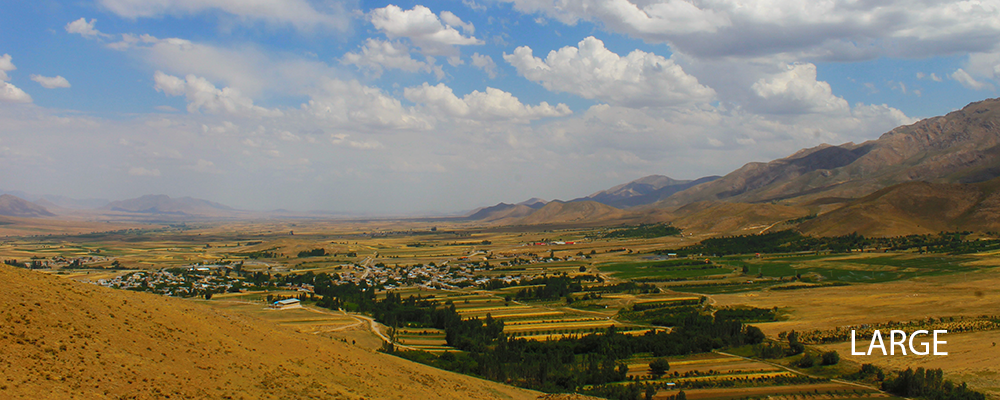
<style>
.page{position:relative;width:1000px;height:400px}
.page>*{position:absolute;margin:0}
.t1{font:36px "MyriadPro-Regular";color:#ffffff}
</style>
<div class="page">
<p class="t1" style="left:851px;top:330px;width:97px;height:25px">LARGE</p>
</div>
